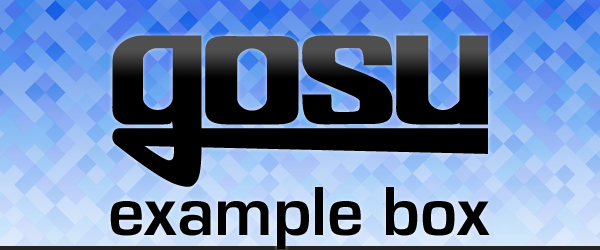
<style>
.page{position:relative;width:600px;height:250px}
.page>*{position:absolute;margin:0}
.t1{font:72px "EurostileBold";color:#000000}
</style>
<div class="page">
<p class="t1" style="left:110px;top:187px;width:380px;height:63px">example box</p>
</div>
